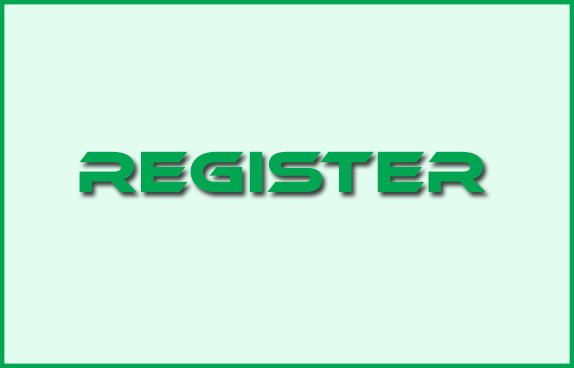
<style>
.page{position:relative;width:574px;height:368px;background:#e2fcef}
.page>*{position:absolute;margin:0}
.t1{font:60px "EthnocentricRg-Regular";color:#00a651}
</style>
<div class="page">
<p class="t1" style="left:79px;top:151px;width:407px;height:41px">Register</p>
</div>
